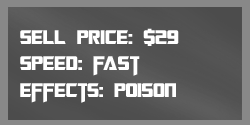
<style>
.page{position:relative;width:250px;height:125px}
.page>*{position:absolute;margin:0}
.t1{font:22px "TransformersMovie";color:#ffffff}
.t2{font:22px "TransformersMovie";letter-spacing:0.02em;color:#ffffff}
.t3{font:22px "TransformersMovie";letter-spacing:-0.08em;color:#ffffff}
</style>
<div class="page">
<p class="t1" style="left:20px;top:28px;width:159px;height:75px">sell p<span class="t2">ri</span>ce: $29<br>spee<span class="t2">d</span>: <span class="t3">f</span><span class="t2">ast<br></span>effects: poison</p>
</div>
